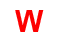
<style>
.page{position:relative;width:60px;height:40px;background:#ffffff}
.page>*{position:absolute;margin:0}
.t1{font:30px "Arial-BoldMT";letter-spacing:-0.025em;color:#fd0000}
</style>
<div class="page">
<p class="t1" style="left:15px;top:10px;width:29px;height:22px">W</p>
</div>
